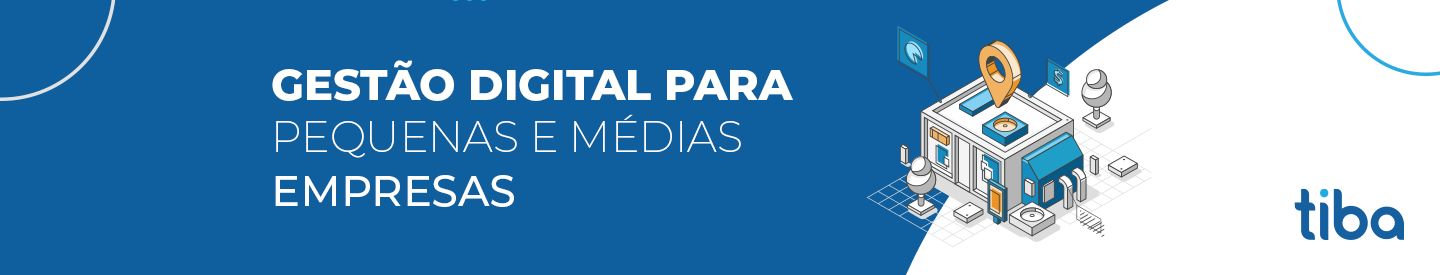
<style>
.page{position:relative;width:1440px;height:275px;background:#0f5f9e}
.page>*{position:absolute;margin:0}
.t1{font:43px "Montserrat-ExtraBold";color:#fffffe}
.t2{font:43px "Montserrat-ExtraLight";color:#fffffe}
.t3{font:43px "Montserrat-Medium";color:#fffffe}
</style>
<div class="page">
<p class="t1" style="left:272px;top:60px;width:521px;height:41px">GESTÃO DIGITAL PARA</p>
<p class="t2" style="left:276px;top:114px;width:465px;height:44px">PEQUENAS E MÉDIAS</p>
<p class="t3" style="left:275px;top:175px;width:239px;height:32px">EMPRESAS</p>
</div>
